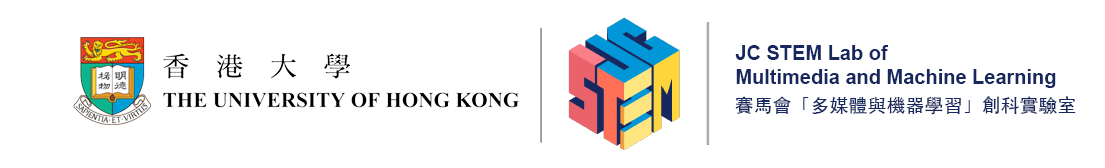
<style>
.page{position:relative;width:1105px;height:168px;background:#ffffff}
.page>*{position:absolute;margin:0}
.t1{font:20px/24px "Arial-BoldMT";color:#17285f}
.t2{font:19px "STHeitiSC-Medium";color:#17285f}
</style>
<div class="page">
<p class="t1" style="left:735px;top:45px;width:321px;height:43px">JC STEM Lab of<br>Multimedia and Machine Learning</p>
<p class="t2" style="left:735px;top:96px;width:341px;height:19px">賽馬會「多媒體與機器學習」創科實驗室</p>
</div>
